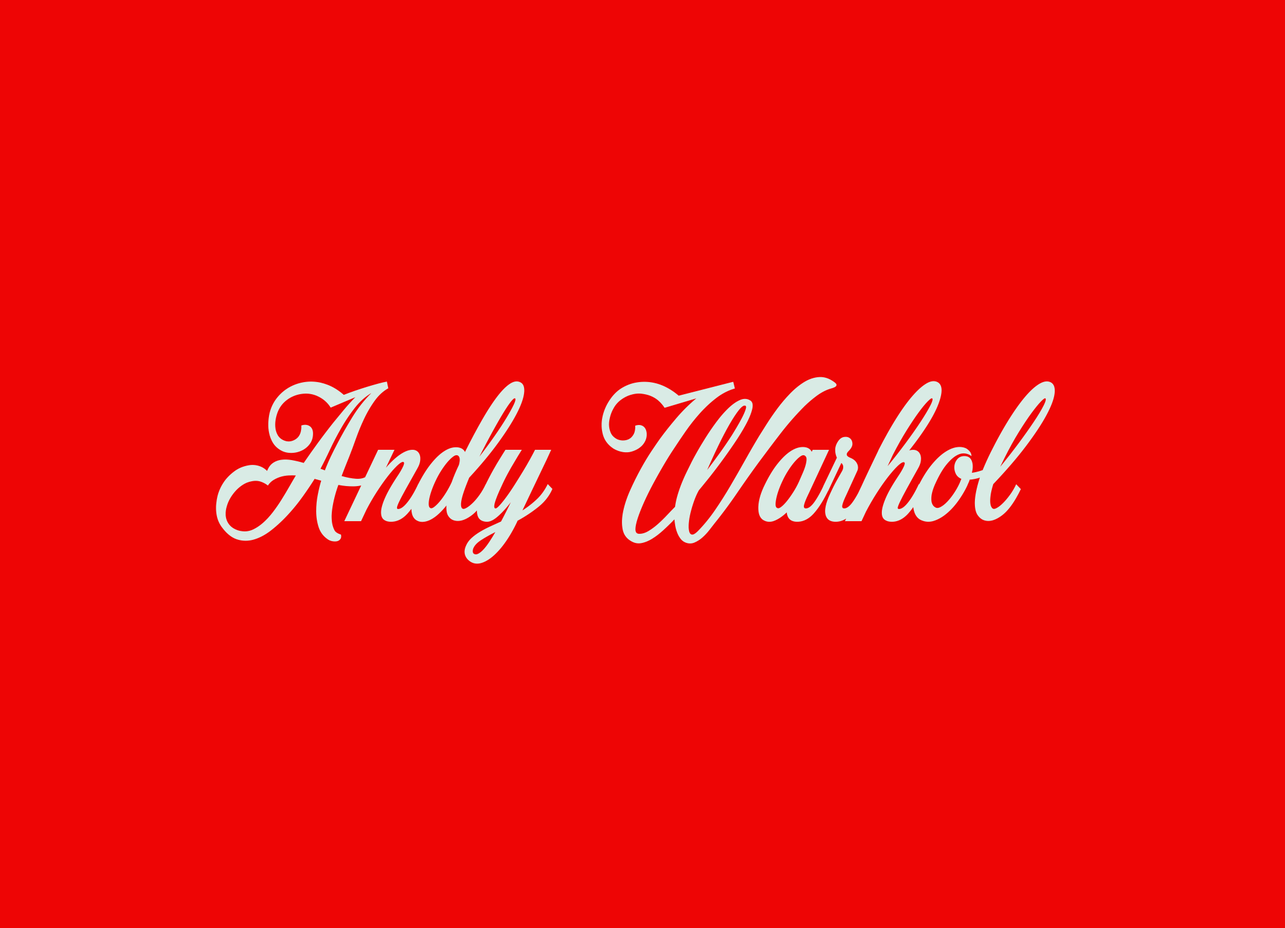
<style>
.page{position:relative;width:1285px;height:928px;background:#ee0505}
.page>*{position:absolute;margin:0}
.t1{font:201.5px "MocharyPERSONALUSEONLY";color:#d9ebe5}
</style>
<div class="page">
<p class="t1" style="left:216px;top:377px;width:839px;height:187px">Andy Warhol</p>
</div>
